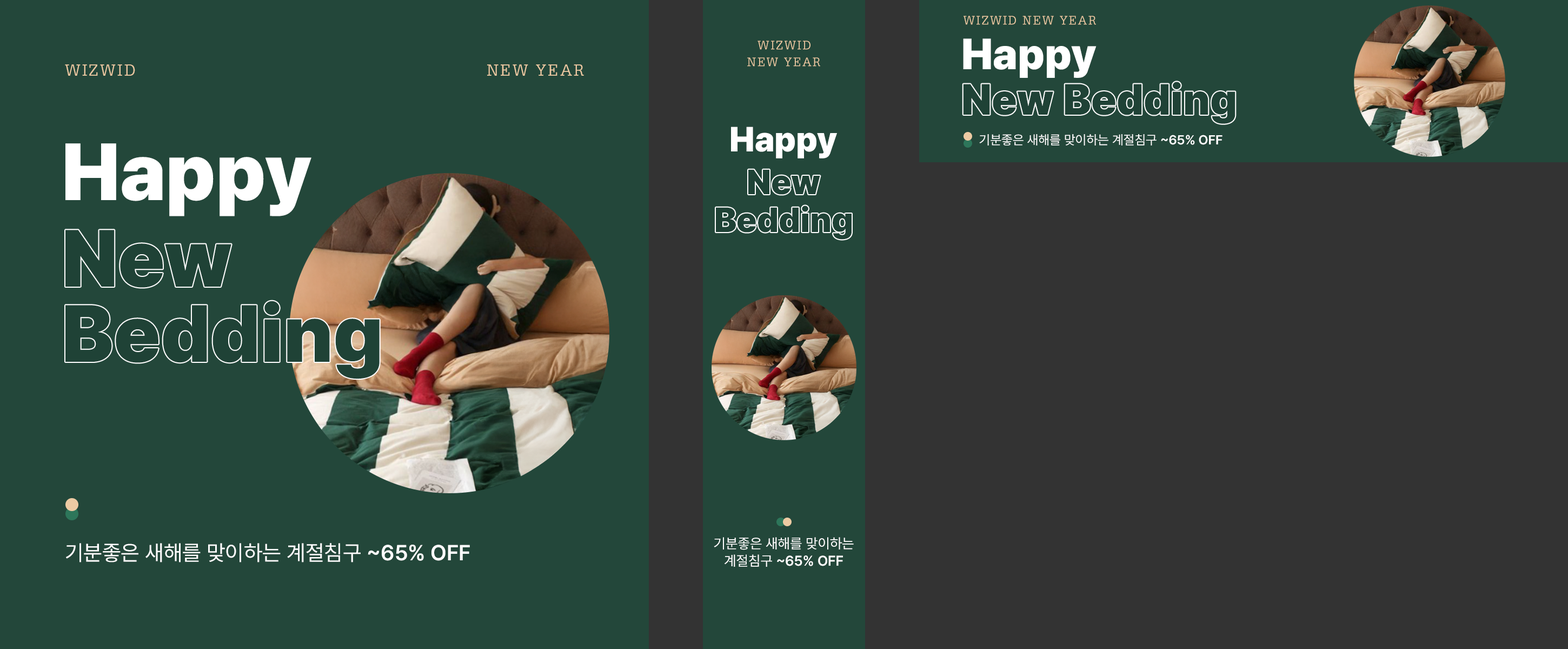
<style>
.page{position:relative;width:1568px;height:649px;background:#23473a}
.page>*{position:absolute;margin:0}
.t1{font:13px "SDBook-aLt";letter-spacing:0.1em;color:#edcaa3}
.t2{font:43.3px "Pretendard-Black";color:#ffffff}
.t3{font:17.3px "SDBook-aLt";letter-spacing:0.1em;color:#edcaa3}
.t4{font:34.6px "Pretendard-Black";color:#ffffff}
.t5{font:13px "Pretendard-Regular";color:#ffffff}
.t6{font:13px "Pretendard-SemiBold";color:#ffffff}
.t7{font:80px "Pretendard-Black";color:#ffffff}
.t8{font:34.6px "Pretendard-Black";color:#1f4236}
.t9{font:80px "Pretendard-Black";color:#1f4236}
.t10{font:21.6px "Pretendard-Regular";color:#ffffff}
.t11{font:21.6px "Pretendard-SemiBold";color:#ffffff}
.t12{font:14.1px "Pretendard-Regular";color:#ffffff}
.t13{font:14.1px "Pretendard-SemiBold";color:#ffffff}
</style>
<div class="page">
<p class="t1" style="left:964px;top:16px;width:132px;height:9px">WIZWID NEW YEAR</p>
<p class="t1" style="left:758px;top:41px;width:52px;height:9px">WIZWID</p>
<p class="t2" style="left:963px;top:38px;width:134px;height:40px">Happy</p>
<p class="t3" style="left:65px;top:64px;width:70px;height:12px">WIZWID</p>
<p class="t3" style="left:487px;top:64px;width:97px;height:12px">NEW YEAR</p>
<p class="t1" style="left:747px;top:57px;width:73px;height:10px">NEW YEAR</p>
<p class="t4" style="left:731px;top:127px;width:106px;height:31px">Happy</p>
<p class="t5" style="left:979px;top:134px;width:243px;height:11px">기분좋은 새해를 맞이하는 계절침구 <span class="t6">~65% OFF</span></p>
<p class="t7" style="left:65px;top:143px;width:246px;height:73px">Happy</p>
<p class="t8" style="left:748px;top:169px;width:72px;height:26px">New</p>
<p class="t8" style="left:716px;top:205px;width:136px;height:35px">Bedding</p>
<p class="t9" style="left:65px;top:230px;width:166px;height:58px">New</p>
<p class="t9" style="left:65px;top:301px;width:315px;height:78px">Bedding</p>
<p class="t10" style="left:66px;top:543px;width:404px;height:19px">기분좋은 새해를 맞이하는 계절침구 <span class="t11">~65% OFF</span></p>
<p class="t12" style="left:714px;top:537px;width:140px;height:30px;text-align:center">기분좋은 새해를 맞이하는<br>계절침구 <span class="t13">~65% OFF</span></p>
</div>
